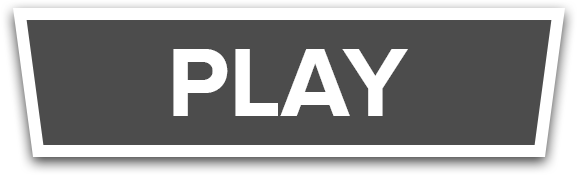
<style>
.page{position:relative;width:579px;height:176px;background:#4c4c4c}
.page>*{position:absolute;margin:0}
.t1{font:100px "ProximaNova-Bold";color:#ffffff;text-transform:uppercase}
</style>
<div class="page">
<p class="t1" style="left:173px;top:49px;width:235px;height:67px">Play</p>
</div>
